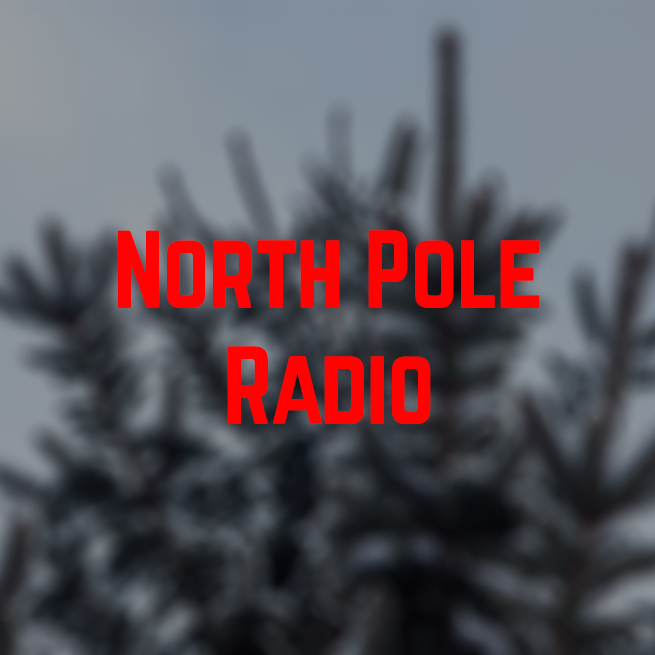
<style>
.page{position:relative;width:655px;height:655px}
.page>*{position:absolute;margin:0}
.t1{font:96.8px "Norwester-Regular";letter-spacing:-0.025em;color:#ff0202}
</style>
<div class="page">
<p class="t1" style="left:117px;top:230px;width:423px;height:194px;text-align:center">North Pole<br>Radio</p>
</div>
